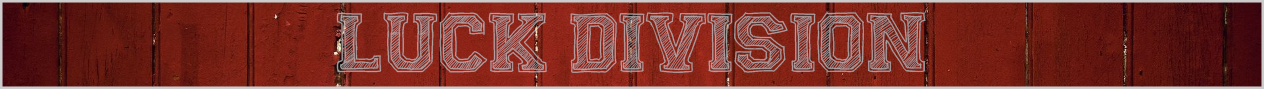
<style>
.page{position:relative;width:1264px;height:89px}
.page>*{position:absolute;margin:0}
.t1{font:84.3px "FineCollege";letter-spacing:-0.01em;color:#b39e9e}
</style>
<div class="page">
<p class="t1" style="left:336px;top:12px;width:590px;height:61px">LUCK DIVISION</p>
<p class="t1" style="left:336px;top:12px;width:590px;height:61px">LUCK DIVISION</p>
<p class="t1" style="left:336px;top:12px;width:590px;height:61px">LUCK DIVISION</p>
</div>
